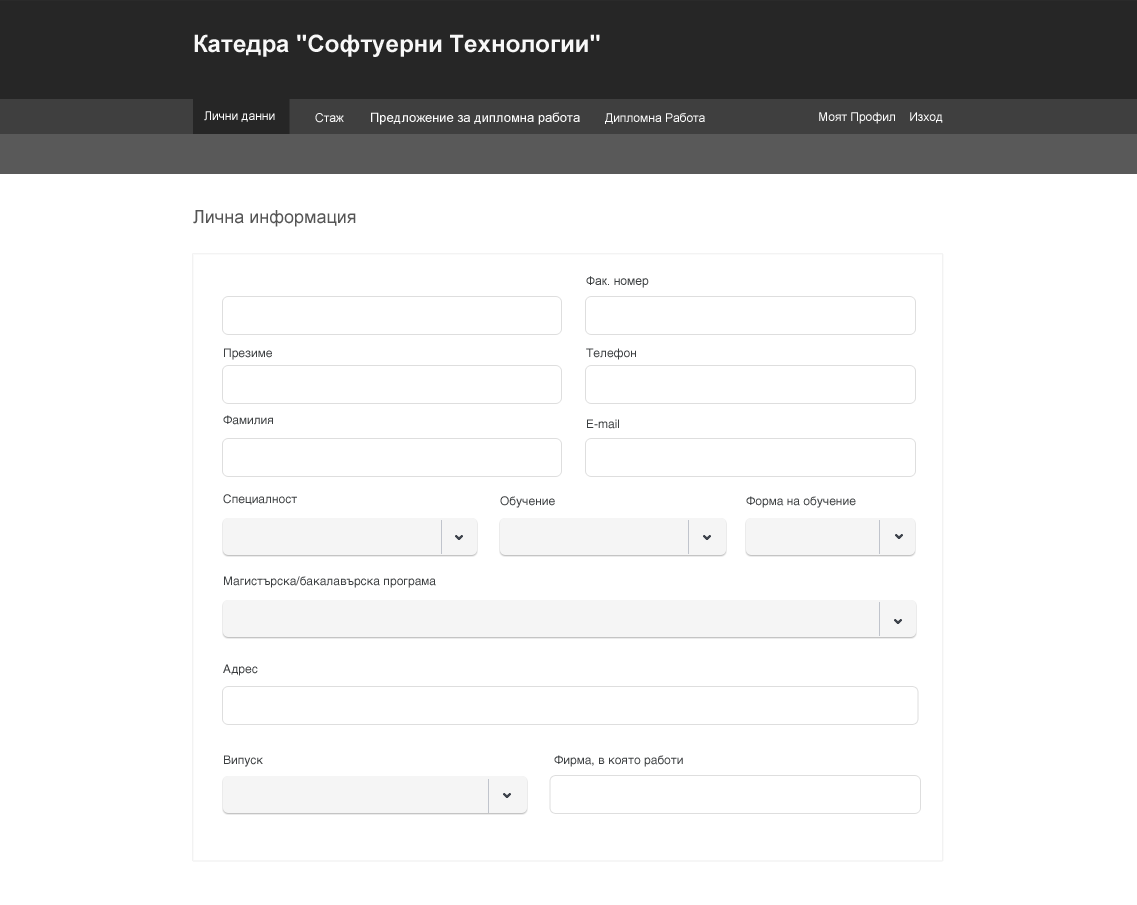
<style>
.page{position:relative;width:1137px;height:905px;background:#ffffff}
.page>*{position:absolute;margin:0}
.t1{font:24px "Arial-BoldMT";color:#f8f8f8}
.t2{font:12px "ArialMT";color:#ffffff}
.t3{font:13px "ArialMT";color:#ffffff}
.t4{font:18px "ArialMT";color:#555555}
.t5{font:12px "ArialMT";color:#3c3f41}
.t6{font:12px "HelveticaLTStd-Roman";color:#3c3f41}
</style>
<div class="page">
<p class="t1" style="left:194px;top:34px;width:406px;height:23px">Катедра "Софтуерни Технологии"</p>
<p class="t2" style="left:204px;top:111px;width:71px;height:11px">Лични данни</p>
<p class="t2" style="left:315px;top:113px;width:29px;height:10px">Стаж</p>
<p class="t3" style="left:371px;top:112px;width:209px;height:13px">Предложение за дипломна работа</p>
<p class="t2" style="left:605px;top:113px;width:100px;height:11px">Дипломна Работа</p>
<p class="t2" style="left:819px;top:112px;width:124px;height:12px">Моят Профил    Изход</p>
<p class="t4" style="left:193px;top:210px;width:163px;height:17px">Лична информация</p>
<p class="t5" style="left:586px;top:276px;width:63px;height:12px">Фак. номер</p>
<p class="t6" style="left:224px;top:348px;width:48px;height:12px">Презиме</p>
<p class="t6" style="left:586px;top:348px;width:50px;height:12px">Телефон</p>
<p class="t6" style="left:223px;top:415px;width:50px;height:10px">Фамилия</p>
<p class="t6" style="left:587px;top:419px;width:32px;height:10px">E-mail</p>
<p class="t6" style="left:223px;top:494px;width:74px;height:11px">Специалност</p>
<p class="t6" style="left:500px;top:496px;width:55px;height:12px">Обучение</p>
<p class="t6" style="left:746px;top:496px;width:110px;height:12px">Форма на обучение</p>
<p class="t6" style="left:224px;top:576px;width:212px;height:12px">Магистърска/бакалавърска програма</p>
<p class="t6" style="left:223px;top:664px;width:35px;height:12px">Адрес</p>
<p class="t6" style="left:224px;top:755px;width:39px;height:12px">Випуск</p>
<p class="t6" style="left:554px;top:755px;width:129px;height:12px">Фирма, в която работи</p>
</div>
